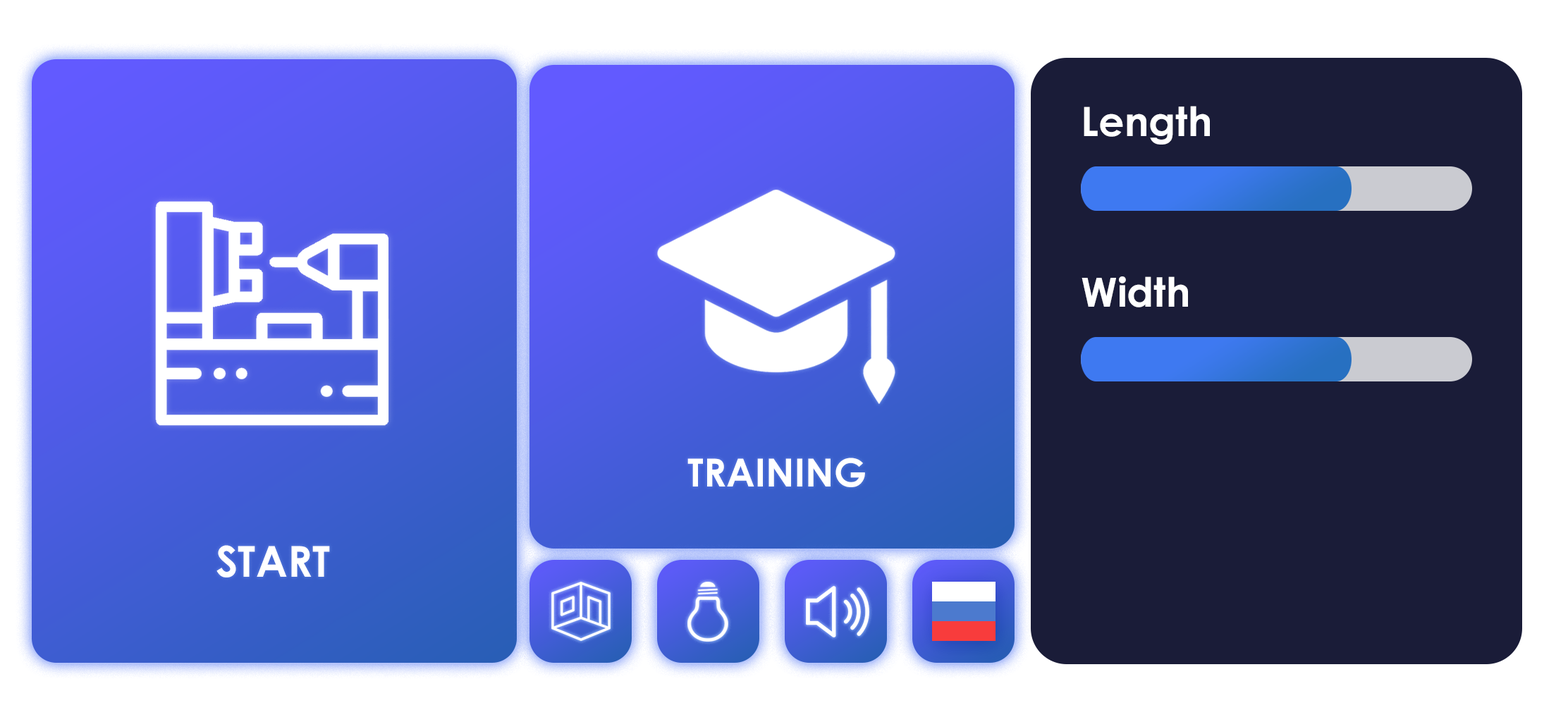
<style>
.page{position:relative;width:1568px;height:722px;background:#1a1c38}
.page>*{position:absolute;margin:0}
.t1{font:40.5px "CenturyGothic-Bold";color:#ffffff}
.t2{font:40.4px "CenturyGothic-Bold";color:#ffffff}
.t3{font:38.8px "CenturyGothic-Bold";color:#ffffff}
.t4{font:42.6px "CenturyGothic-Bold";color:#ffffff}
</style>
<div class="page">
<p class="t1" style="left:1084px;top:106px;width:126px;height:39px">Length</p>
<p class="t2" style="left:1082px;top:276px;width:106px;height:31px">Width</p>
<p class="t3" style="left:687px;top:458px;width:178px;height:29px">TRAINING</p>
<p class="t4" style="left:216px;top:545px;width:114px;height:32px">START</p>
</div>
